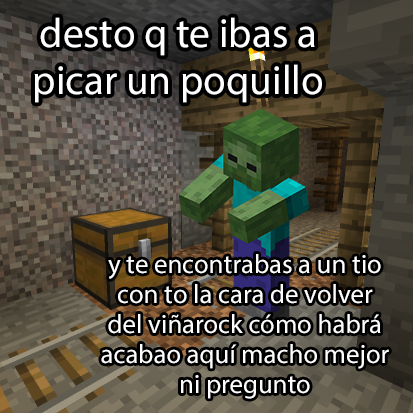
<style>
.page{position:relative;width:413px;height:413px}
.page>*{position:absolute;margin:0}
.t1{font:41.2px "MyriadPro-Regular";color:#ffffff}
.t2{font:26.7px "MyriadPro-Regular";color:#ffffff}
</style>
<div class="page">
<p class="t1" style="left:34px;top:17px;width:288px;height:86px;text-align:center">desto q te ibas a<br>picar un poquillo</p>
<p class="t2" style="left:101px;top:254px;width:288px;height:145px;text-align:center">y te encontrabas a un tio<br>con to la cara de volver<br>del viñarock cómo habrá<br>acabao aquí macho mejor<br>ni pregunto</p>
</div>
